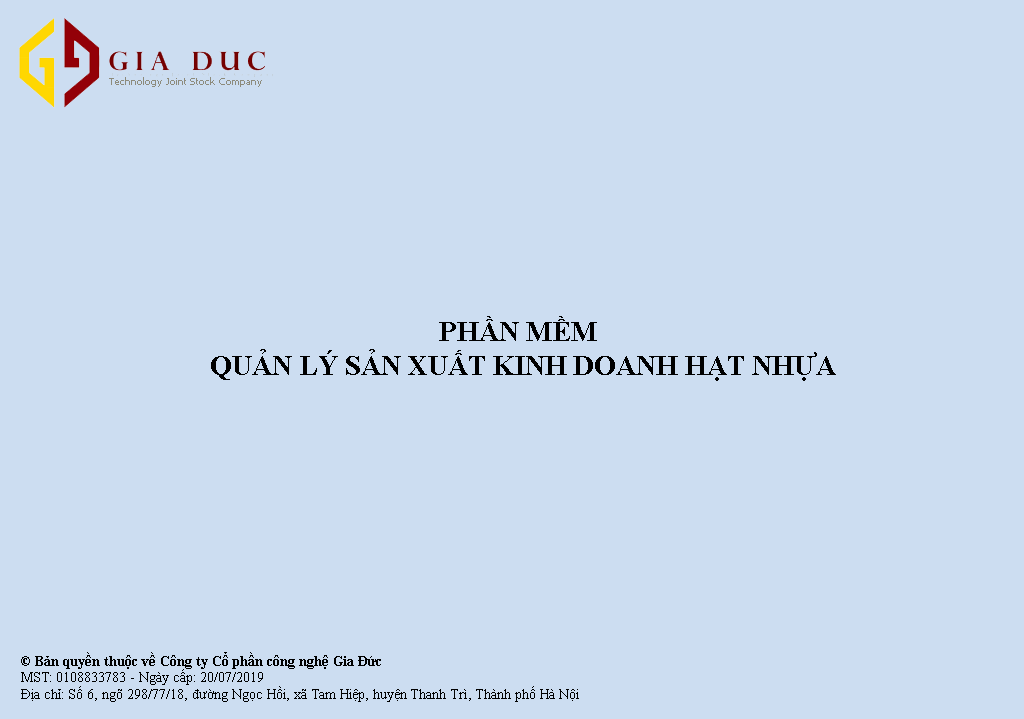
<style>
.page{position:relative;width:1024px;height:719px;background:#ccddf1}
.page>*{position:absolute;margin:0}
.t1{font:10px "Tahoma";color:#8d8b7c}
.t2{font:28px "TimesNewRomanPS-BoldMT";color:#000000}
.t3{font:14px "TimesNewRomanPSMT";color:#000000}
.t4{font:14px "TimesNewRomanPS-BoldMT";color:#000000}
</style>
<div class="page">
<p class="t1" style="left:109px;top:77px;width:153px;height:10px">Technology Joint Stock Company</p>
<p class="t2" style="left:211px;top:316px;width:625px;height:65px;text-align:center">PHẦN MỀM <br>QUẢN LÝ SẢN XUẤT KINH DOANH HẠT NHỰA</p>
<p class="t3" style="left:21px;top:652px;width:558px;height:50px"><span class="t4">© Bản quyền thuộc về Công ty Cổ phần công nghệ Gia Đức<br></span>MST: 0108833783 - Ngày cấp: 20/07/2019<br>Địa chỉ: Số 6, ngõ 298/77/18, đường Ngọc Hồi, xã Tam Hiệp, huyện Thanh Trì, Thành phố Hà Nội</p>
</div>
